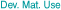
<style>
.page{position:relative;width:61px;height:10px;background:#ffffff}
.page>*{position:absolute;margin:0}
.t1{font:10px "FutoGoB101Pr5-Bold";letter-spacing:-0.04em;color:#00999c}
</style>
<div class="page">
<p class="t1" style="left:1px;top:0px;width:60px;height:9px">Dev. Mat. Use</p>
</div>
